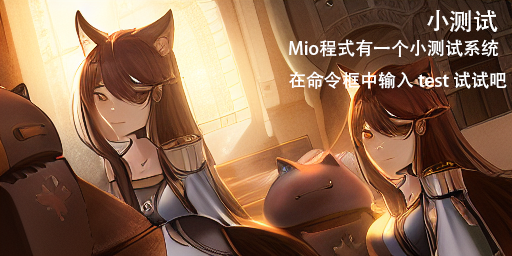
<style>
.page{position:relative;width:512px;height:256px}
.page>*{position:absolute;margin:0}
.t1{font:24px "AdobeHeitiStd-Regular";color:#ffffff}
.t2{font:18px "AdobeHeitiStd-Regular";color:#ffffff}
</style>
<div class="page">
<p class="t1" style="left:427px;top:10px;width:71px;height:22px">小测试</p>
<p class="t2" style="left:289px;top:39px;width:218px;height:50px">Mio程式有一个小测试系统<br>在命令框中输入 test 试试吧</p>
</div>
